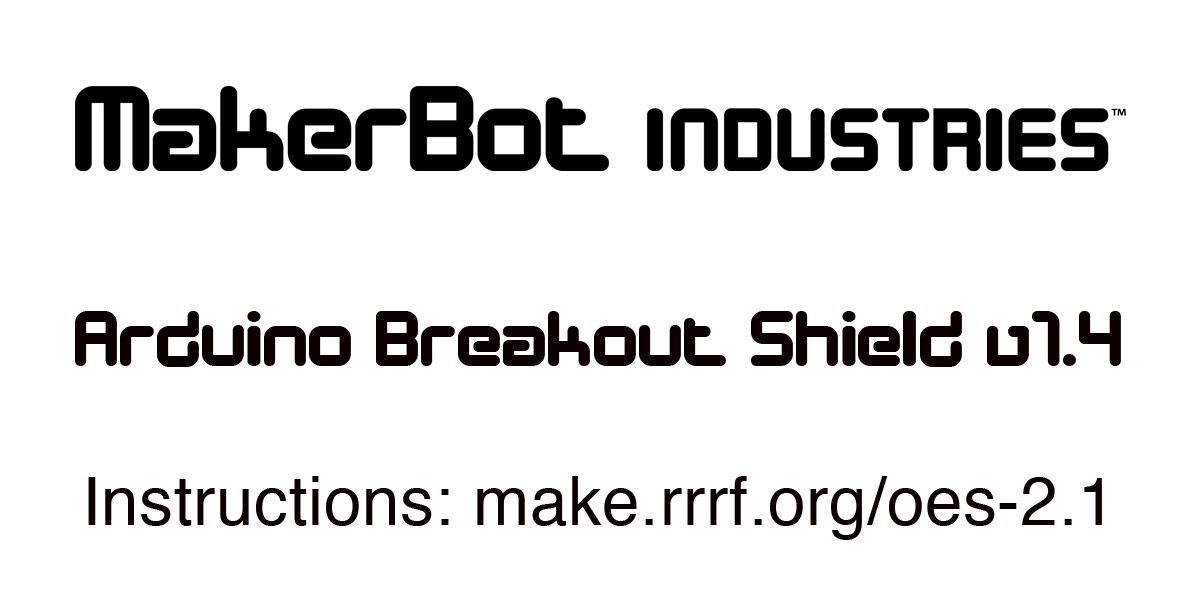
<style>
.page{position:relative;width:1200px;height:600px;background:#ffffff}
.page>*{position:absolute;margin:0}
.t1{font:81.3px "DesignerBlock";letter-spacing:0.01em;color:#0c0000}
.t2{font:67.4px "Helvetica";letter-spacing:0.01em;color:#0c0000}
</style>
<div class="page">
<p class="t1" style="left:75px;top:311px;width:1046px;height:56px">Arduino Breakout Shield v1.4</p>
<p class="t2" style="left:88px;top:476px;width:1014px;height:64px">Instructions: make.rrrf.org/oes-2.1</p>
</div>
